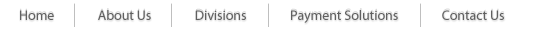
<style>
.page{position:relative;width:535px;height:30px;background:#ffffff}
.page>*{position:absolute;margin:0}
.t1{font:15.3px "MyriadPro-Regular";letter-spacing:-0.005em;scale:0.92 1}
.t2{font:14px "MyriadPro-Regular";letter-spacing:-0.005em;color:#605f5f}
</style>
<div class="page">
<p class="t1" style="left:20px;top:8px;width:485px;height:15px">Home               About Us               Divisions               Payment Solutions               Contact Us</p>
<p class="t2" style="left:20px;top:10px;width:484px;height:13px">Home               About Us               Divisions               Payment Solutions               Contact Us</p>
</div>
